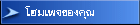
<style>
.page{position:relative;width:140px;height:25px}
.page>*{position:absolute;margin:0}
.t1{font:15.3px "EucrosiaDSE";color:#ffffff;scale:1.12 1}
.t2{font:16.1px "EucrosiaDSE";color:#ffffff;scale:1.12 1}
</style>
<div class="page">
<p class="t1" style="left:25px;top:6px;width:69px;height:13px">â<span class="t2">Î</span>Áà¾¨¢Í§¤Ø³</p>
</div>
